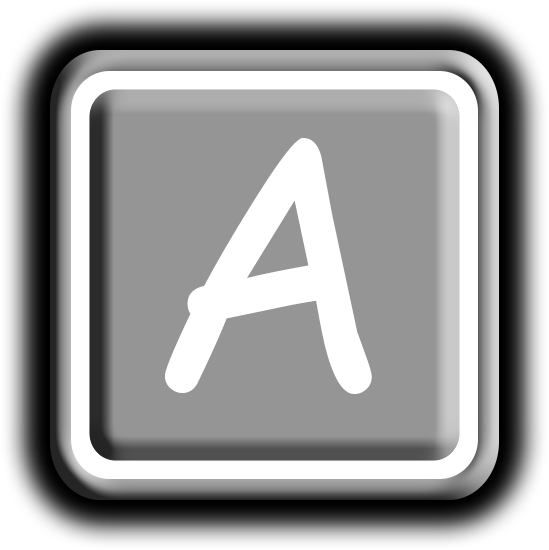
<style>
.page{position:relative;width:549px;height:550px;background:#959595}
.page>*{position:absolute;margin:0}
.t1{font:347.5px "ComicSansMS";color:#ffffff}
</style>
<div class="page">
<p class="t1" style="left:165px;top:138px;width:207px;height:256px">A</p>
</div>
